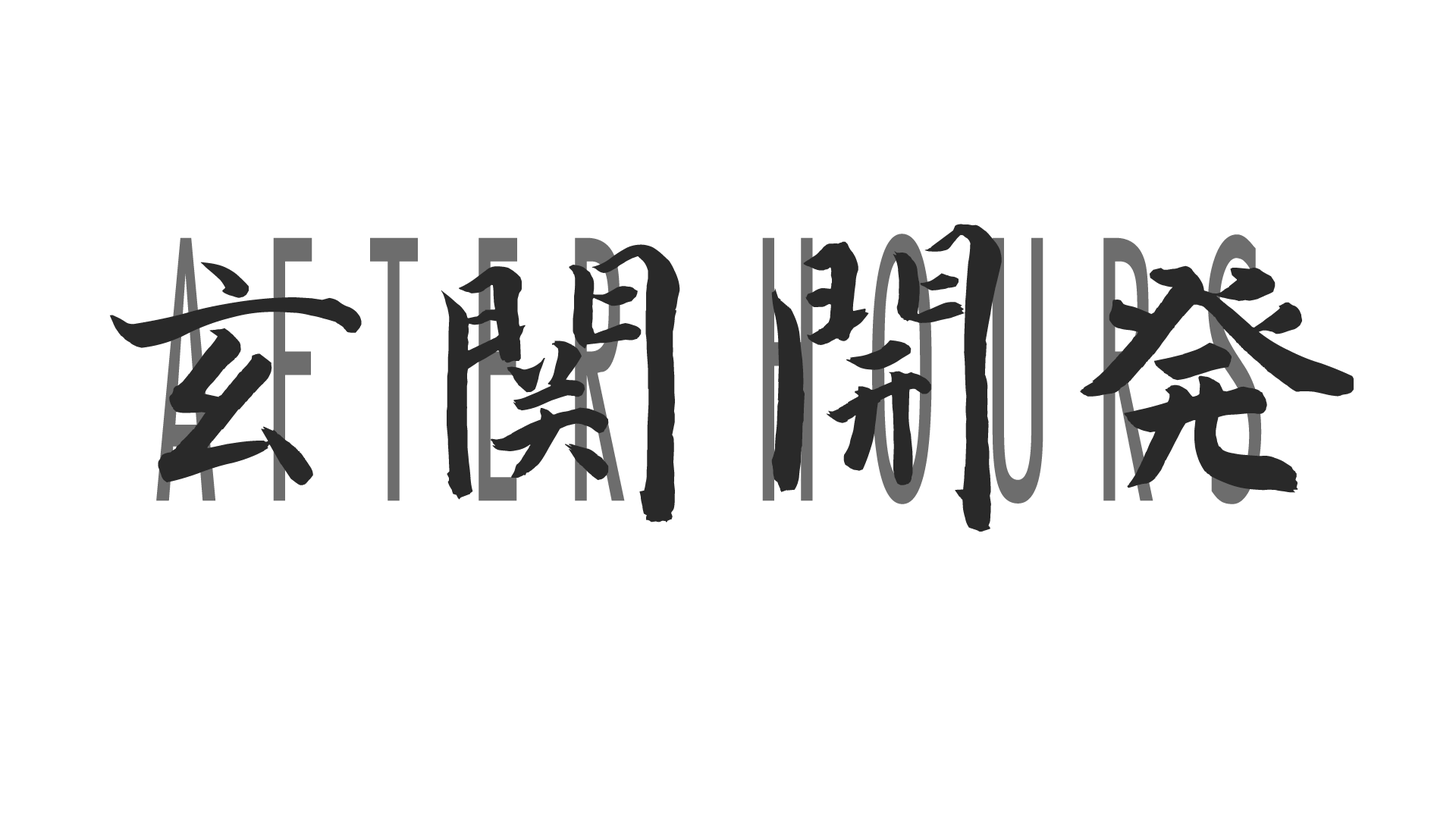
<style>
.page{position:relative;width:1456px;height:819px;background:#ffffff}
.page>*{position:absolute;margin:0}
.t1{font:322.6px "nagayama_kai";color:#292929}
.t2{font:330.1px "FuturaCondMedium";letter-spacing:0.3em;color:#6d6d6d;scale:0.46 1}
</style>
<div class="page">
<p class="t1" style="left:109px;top:224px;width:1245px;height:308px">玄関開発</p>
<p class="t2" style="left:156px;top:234px;width:1106px;height:270px">AFTER HOURS</p>
</div>
